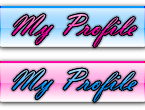
<style>
.page{position:relative;width:145px;height:110px}
.page>*{position:absolute;margin:0}
.t1{font:30px "VladimirScript";letter-spacing:0.032em}
.t2{font:30px "BickhamScriptPro-Regular";letter-spacing:0.032em}
</style>
<div class="page">
<p class="t1" style="left:12px;top:14px;width:125px;height:33px">My Pro<span class="t2">f</span>ile</p>
<p class="t1" style="left:12px;top:68px;width:125px;height:34px">My Pro<span class="t2">f</span>ile</p>
</div>
